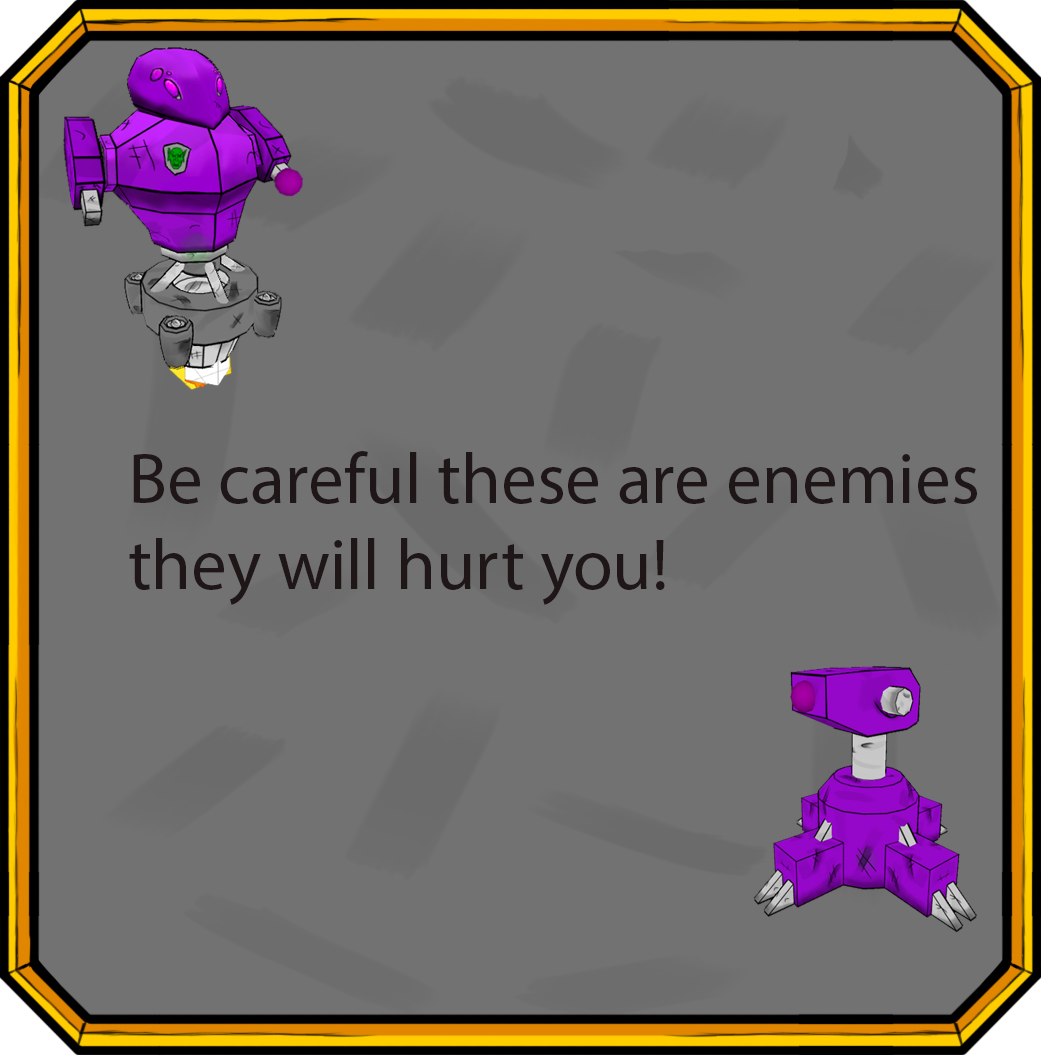
<style>
.page{position:relative;width:1041px;height:1056px;background:#727272}
.page>*{position:absolute;margin:0}
.t1{font:72px "MyriadPro-Regular";color:#1f1717}
</style>
<div class="page">
<p class="t1" style="left:129px;top:451px;width:848px;height:154px">Be careful these are enemies <br>they will hurt you!</p>
</div>
